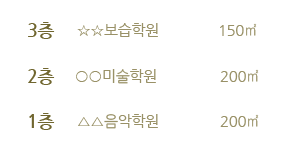
<style>
.page{position:relative;width:290px;height:150px;background:#ffffff}
.page>*{position:absolute;margin:0}
.t1{font:18px "NanumGothicBold";letter-spacing:-0.025em;color:#70662f}
.t2{font:15px "NanumGothic";letter-spacing:-0.025em;color:#999167}
</style>
<div class="page">
<p class="t1" style="left:28px;top:22px;width:27px;height:17px">3층</p>
<p class="t2" style="left:77px;top:23px;width:81px;height:14px">☆☆보습학원</p>
<p class="t2" style="left:220px;top:23px;width:37px;height:13px">150㎡</p>
<p class="t1" style="left:28px;top:68px;width:27px;height:17px">2층</p>
<p class="t2" style="left:76px;top:69px;width:80px;height:15px">○○미술학원</p>
<p class="t2" style="left:220px;top:69px;width:39px;height:13px">200㎡</p>
<p class="t1" style="left:29px;top:113px;width:26px;height:17px">1층</p>
<p class="t2" style="left:78px;top:114px;width:80px;height:15px">△△음악학원</p>
<p class="t2" style="left:220px;top:114px;width:39px;height:13px">200㎡</p>
</div>
